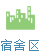
<style>
.page{position:relative;width:40px;height:55px;background:#ffffff}
.page>*{position:absolute;margin:0}
.t1{font:22.5px "SimSun";letter-spacing:0.05em;color:#4788b2;font-variant:small-caps}
</style>
<div class="page">
<p class="t1" style="left:1px;top:39px;width:38px;height:12px">宿舍区</p>
</div>
